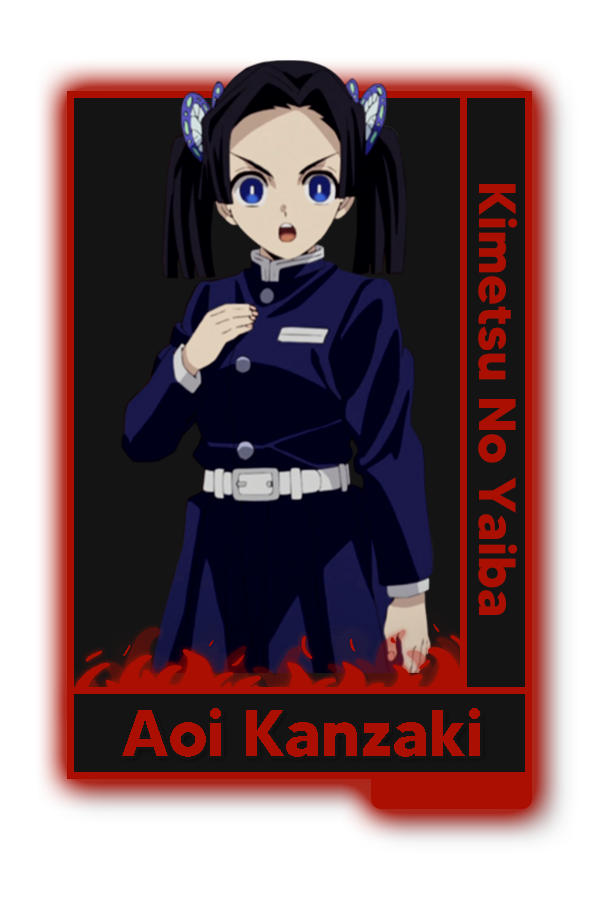
<style>
.page{position:relative;width:600px;height:900px;background:#141414}
.page>*{position:absolute;margin:0}
.t1{font:52px "MADETOMMY-Bold";color:#ab0f01}
.t2{font:65.2px "MADETOMMY-Bold";color:#ab0f01}
</style>
<div class="page">
<p class="t1" style="left:478px;top:184px;width:40px;height:431px;rotate:90deg">Kimetsu No Yaiba</p>
<p class="t2" style="left:122px;top:708px;width:358px;height:49px">Aoi Kanzaki</p>
</div>
